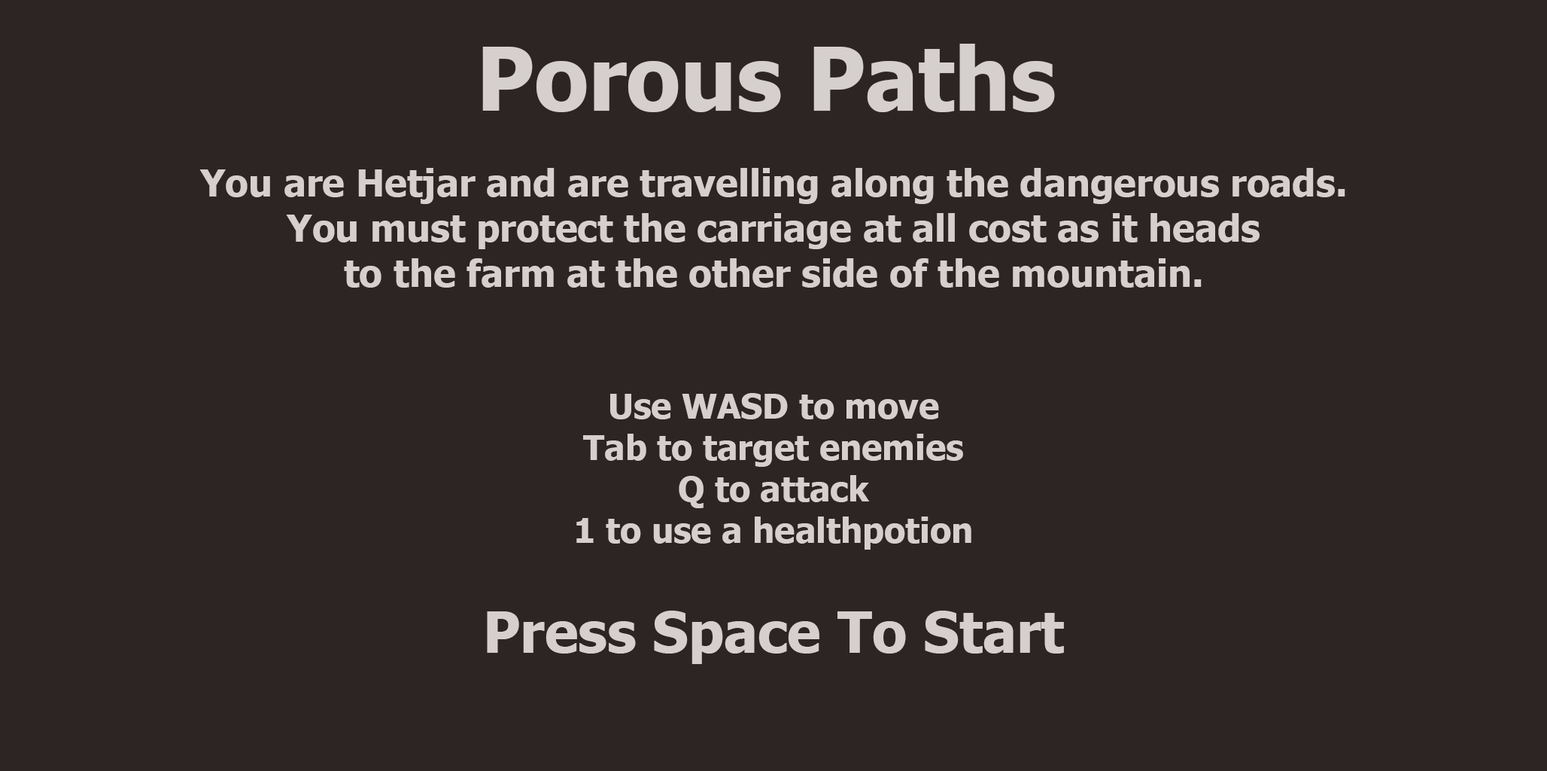
<style>
.page{position:relative;width:1547px;height:771px;background:#2c2524}
.page>*{position:absolute;margin:0}
.t1{font:87.8px "Tahoma-Bold";color:#d5cfcd}
.t2{font:37.6px "Tahoma-Bold";color:#d5cfcd}
.t3{font:34.5px "Tahoma-Bold";color:#d5cfcd}
.t4{font:56.4px "Tahoma-Bold";color:#d5cfcd}
</style>
<div class="page">
<p class="t1" style="left:482px;top:44px;width:573px;height:68px">Porous Paths</p>
<p class="t2" style="left:199px;top:168px;width:1147px;height:381px;text-align:center">You are Hetjar and are travelling along the dangerous roads. <br>You must protect the carriage at all cost as it heads <br>to the farm at the other side of the mountain. <br><br><br><span class="t3">Use WASD to move<br>Tab to target enemies<br>Q to attack<br>1 to use a healthpotion</span></p>
<p class="t4" style="left:487px;top:610px;width:577px;height:54px">Press Space To Start</p>
</div>
